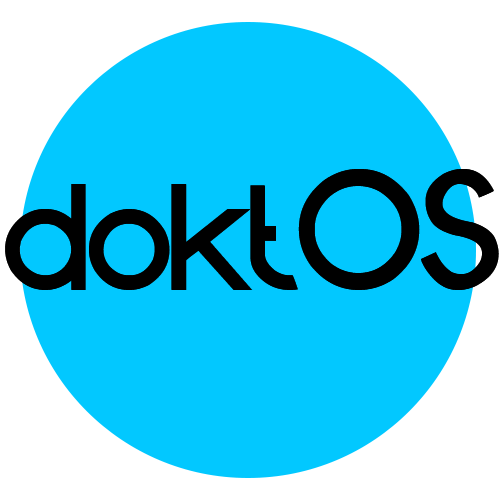
<style>
.page{position:relative;width:500px;height:500px;background:#02c8ff}
.page>*{position:absolute;margin:0}
.t1{font:180.6px "futuremood";color:#000000}
</style>
<div class="page">
<p class="t1" style="left:5px;top:169px;width:494px;height:121px">doktOS</p>
</div>
